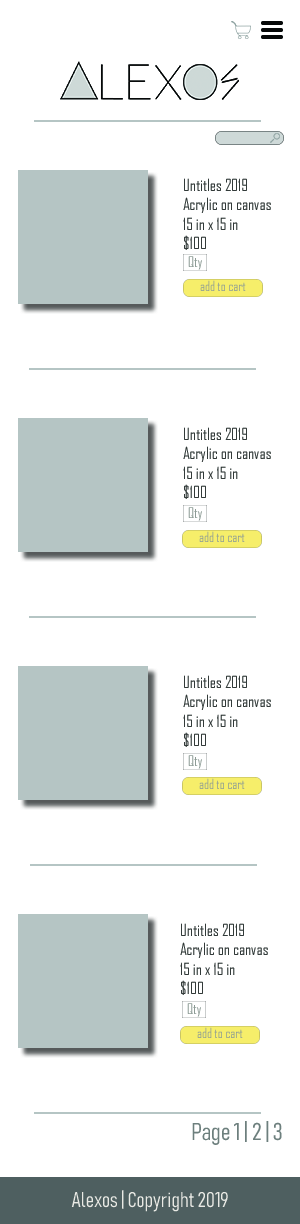
<style>
.page{position:relative;width:300px;height:1224px;background:#ffffff}
.page>*{position:absolute;margin:0}
.t1{font:16px "AgencyFB-Reg";color:#323938}
.t2{font:14px "AgencyFB-Reg";color:#8d9b95}
.t3{font:13.2px "AgencyFB-Reg";color:#8d9b95}
.t4{font:24px "Bahnschrift-LightCondensed";color:#6e7f7d}
.t5{font:21.1px "Bahnschrift-LightCondensed";color:#e9e9e4}
</style>
<div class="page">
<p class="t1" style="left:183px;top:178px;width:88px;height:72px">Untitles 2019<br>Acrylic on canvas<br>15 in x 15 in<br>$100</p>
<p class="t2" style="left:188px;top:256px;width:14px;height:14px">Qty</p>
<p class="t3" style="left:200px;top:280px;width:46px;height:11px">add to cart</p>
<p class="t1" style="left:183px;top:427px;width:88px;height:72px">Untitles 2019<br>Acrylic on canvas<br>15 in x 15 in<br>$100</p>
<p class="t2" style="left:188px;top:507px;width:14px;height:14px">Qty</p>
<p class="t3" style="left:199px;top:531px;width:46px;height:11px">add to cart</p>
<p class="t1" style="left:183px;top:675px;width:88px;height:72px">Untitles 2019<br>Acrylic on canvas<br>15 in x 15 in<br>$100</p>
<p class="t2" style="left:188px;top:755px;width:14px;height:14px">Qty</p>
<p class="t3" style="left:199px;top:778px;width:46px;height:11px">add to cart</p>
<p class="t1" style="left:180px;top:923px;width:88px;height:72px">Untitles 2019<br>Acrylic on canvas<br>15 in x 15 in<br>$100</p>
<p class="t2" style="left:187px;top:1003px;width:14px;height:14px">Qty</p>
<p class="t3" style="left:197px;top:1027px;width:46px;height:11px">add to cart</p>
<p class="t4" style="left:192px;top:1121px;width:90px;height:24px">Page 1 | 2 | 3</p>
<p class="t5" style="left:71px;top:1190px;width:157px;height:22px">Alexos | Copyright 2019</p>
</div>
